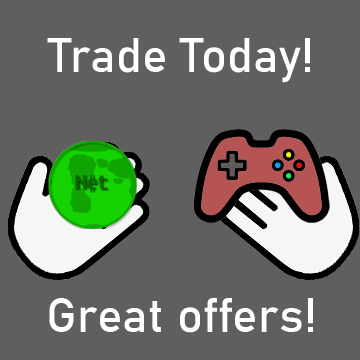
<style>
.page{position:relative;width:360px;height:360px;background:#5f5f5f}
.page>*{position:absolute;margin:0}
.t1{font:48px "Bahnschrift";color:#ffffff}
</style>
<div class="page">
<p class="t1" style="left:47px;top:38px;width:263px;height:45px">Trade Today!</p>
<p class="t1" style="left:49px;top:298px;width:264px;height:35px">Great offers!</p>
</div>
